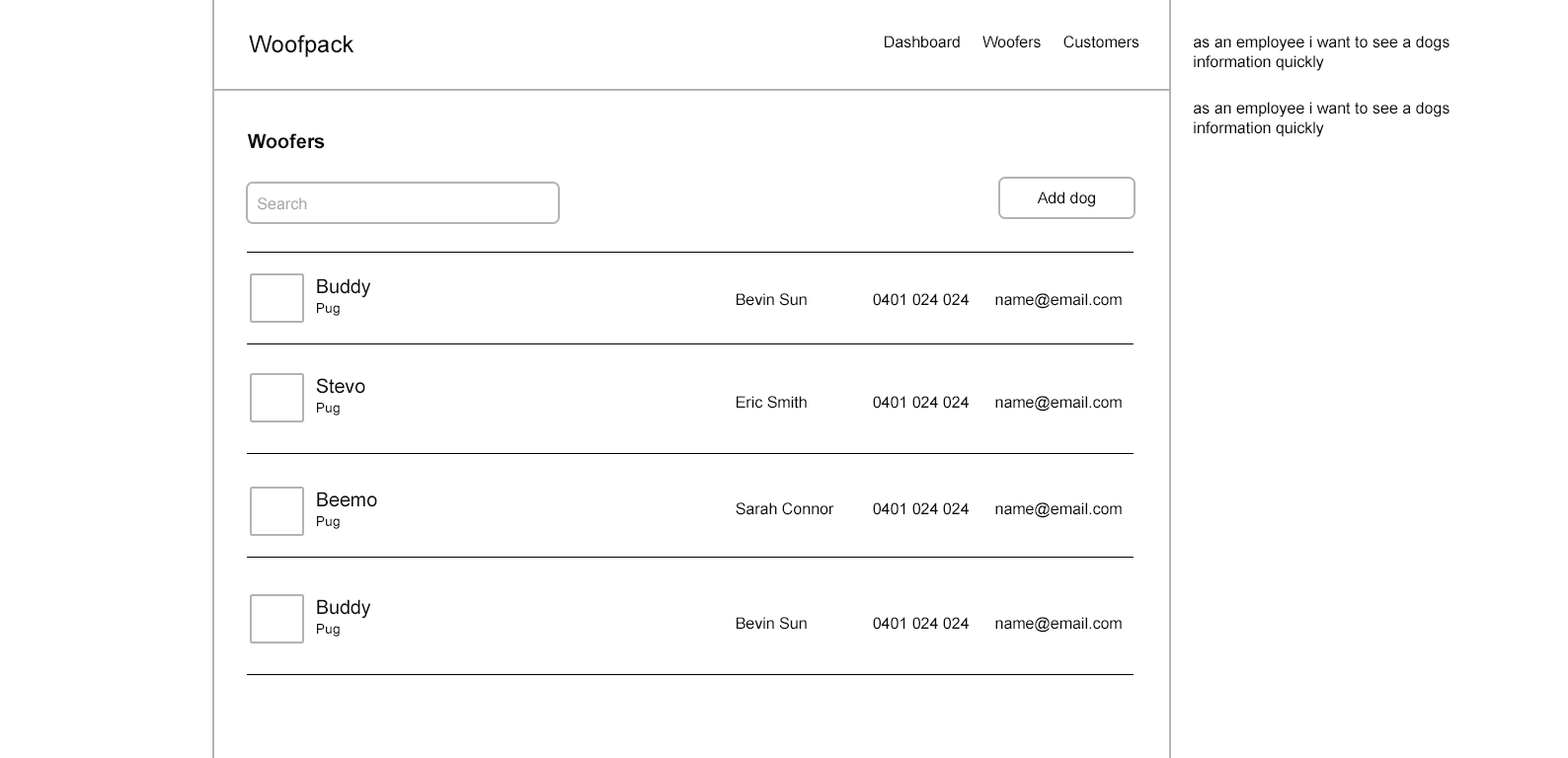
<style>
.page{position:relative;width:1568px;height:758px;background:#ffffff}
.page>*{position:absolute;margin:0}
.t1{font:23.7px "ArialMT";color:#0c0b0b}
.t2{font:15.8px "ArialMT";color:#0c0b0b}
.t3{font:15.8px/19.7px "ArialMT";color:#0c0b0b}
.t4{font:19.5px "Arial-BoldMT";color:#0c0b0b}
.t5{font:15.8px "ArialMT";color:#a5a5a5}
.t6{font:19.5px "ArialMT";color:#0c0b0b}
.t7{font:13.8px "ArialMT";color:#0c0b0b}
</style>
<div class="page">
<p class="t1" style="left:249px;top:35px;width:105px;height:22px">Woofpack</p>
<p class="t2" style="left:885px;top:36px;width:254px;height:12px">Dashboard     Woofers     Customers</p>
<p class="t3" style="left:1194px;top:36px;width:256px;height:35px">as an employee i want to see a dogs information quickly</p>
<p class="t3" style="left:1194px;top:102px;width:256px;height:35px">as an employee i want to see a dogs information quickly</p>
<p class="t4" style="left:247px;top:133px;width:78px;height:16px">Woofers</p>
<p class="t5" style="left:258px;top:197px;width:49px;height:13px">Search</p>
<p class="t2" style="left:1037px;top:192px;width:58px;height:15px">Add dog</p>
<p class="t6" style="left:317px;top:278px;width:54px;height:20px">Buddy</p>
<p class="t2" style="left:737px;top:293px;width:70px;height:13px">Bevin Sun</p>
<p class="t2" style="left:873px;top:293px;width:96px;height:13px">0401 024 024</p>
<p class="t2" style="left:995px;top:293px;width:127px;height:16px">name@email.com</p>
<p class="t7" style="left:317px;top:303px;width:23px;height:13px">Pug</p>
<p class="t6" style="left:316px;top:378px;width:49px;height:16px">Stevo</p>
<p class="t2" style="left:737px;top:396px;width:70px;height:13px">Eric Smith</p>
<p class="t2" style="left:873px;top:396px;width:96px;height:13px">0401 024 024</p>
<p class="t2" style="left:995px;top:396px;width:127px;height:16px">name@email.com</p>
<p class="t7" style="left:317px;top:403px;width:23px;height:13px">Pug</p>
<p class="t6" style="left:317px;top:492px;width:60px;height:16px">Beemo</p>
<p class="t2" style="left:736px;top:503px;width:98px;height:12px">Sarah Connor</p>
<p class="t2" style="left:873px;top:503px;width:96px;height:12px">0401 024 024</p>
<p class="t2" style="left:995px;top:503px;width:127px;height:15px">name@email.com</p>
<p class="t7" style="left:317px;top:516px;width:23px;height:13px">Pug</p>
<p class="t6" style="left:317px;top:599px;width:54px;height:20px">Buddy</p>
<p class="t2" style="left:737px;top:617px;width:70px;height:13px">Bevin Sun</p>
<p class="t2" style="left:873px;top:617px;width:96px;height:13px">0401 024 024</p>
<p class="t2" style="left:995px;top:617px;width:127px;height:16px">name@email.com</p>
<p class="t7" style="left:317px;top:624px;width:23px;height:13px">Pug</p>
</div>
